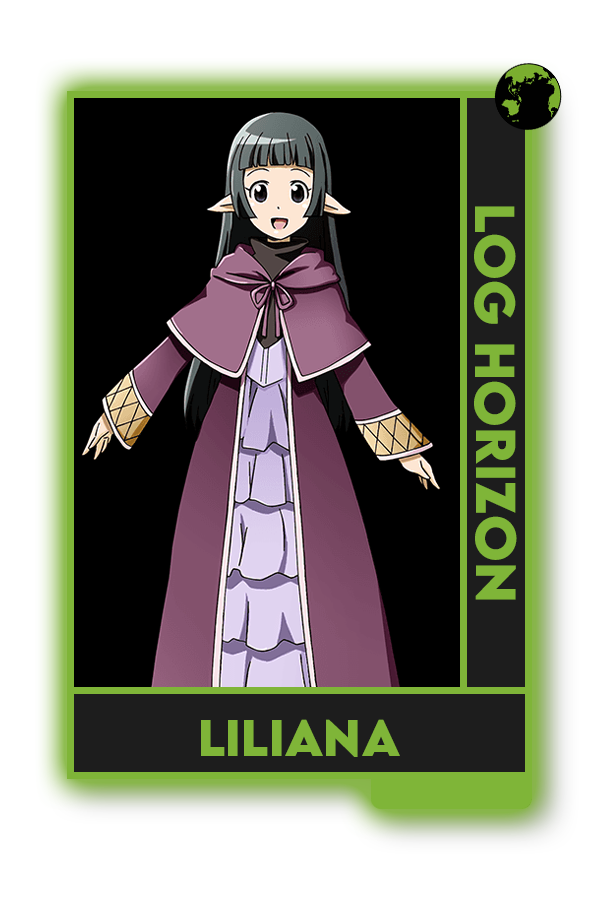
<style>
.page{position:relative;width:600px;height:900px;background:#000000}
.page>*{position:absolute;margin:0}
.t1{font:50px "LEMONMILK-Bold";color:#7fad41}
.t2{font:45.8px "LEMONMILK-Bold";color:#7fad41}
</style>
<div class="page">
<p class="t1" style="left:474px;top:206px;width:43px;height:394px;rotate:90deg">Log Horizon</p>
<p class="t2" style="left:201px;top:719px;width:199px;height:38px">Liliana</p>
</div>
